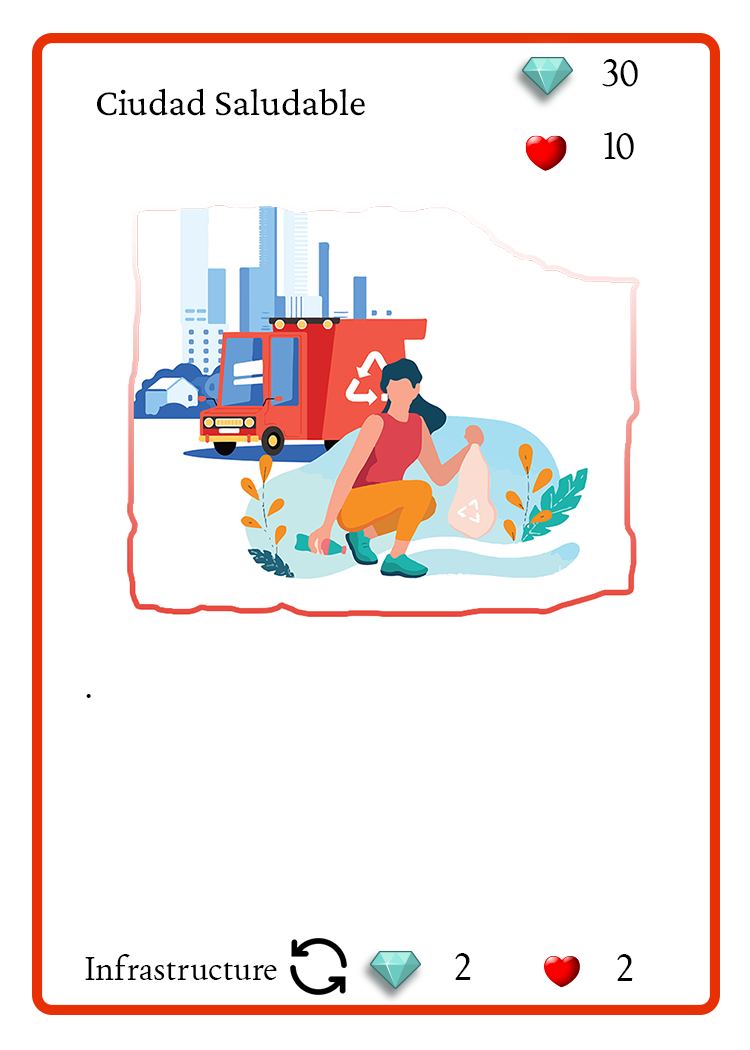
<style>
.page{position:relative;width:750px;height:1050px;background:#ffffff}
.page>*{position:absolute;margin:0}
.t1{font:37.5px "Joan-Regular";color:#000000;text-transform:uppercase}
.t2{font:38.9px "CrimsonPro-Regular";color:#000000}
.t3{font:33.3px "Joan-Regular";color:#000000}
</style>
<div class="page">
<p class="t1" style="left:602px;top:59px;width:36px;height:28px">30</p>
<p class="t2" style="left:97px;top:88px;width:268px;height:28px">Ciudad Saludable</p>
<p class="t1" style="left:604px;top:132px;width:30px;height:28px">10</p>
<p class="t3" style="left:86px;top:694px;width:5px;height:4px">.</p>
<p class="t1" style="left:455px;top:953px;width:16px;height:27px">2</p>
<p class="t3" style="left:85px;top:954px;width:192px;height:26px">Infrastructure</p>
<p class="t1" style="left:617px;top:954px;width:16px;height:27px">2</p>
</div>
